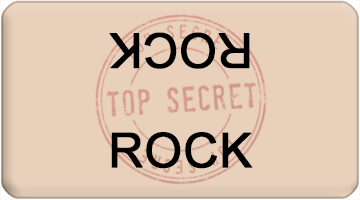
<style>
.page{position:relative;width:360px;height:200px;background:#e8d0bb}
.page>*{position:absolute;margin:0}
.t1{font:48px "ArialMT";color:#000000;font-weight:bold}
</style>
<div class="page">
<p class="t1" style="left:109px;top:32px;width:141px;height:37px;rotate:180deg">ROCK</p>
<p class="t1" style="left:111px;top:132px;width:142px;height:37px">ROCK</p>
</div>
